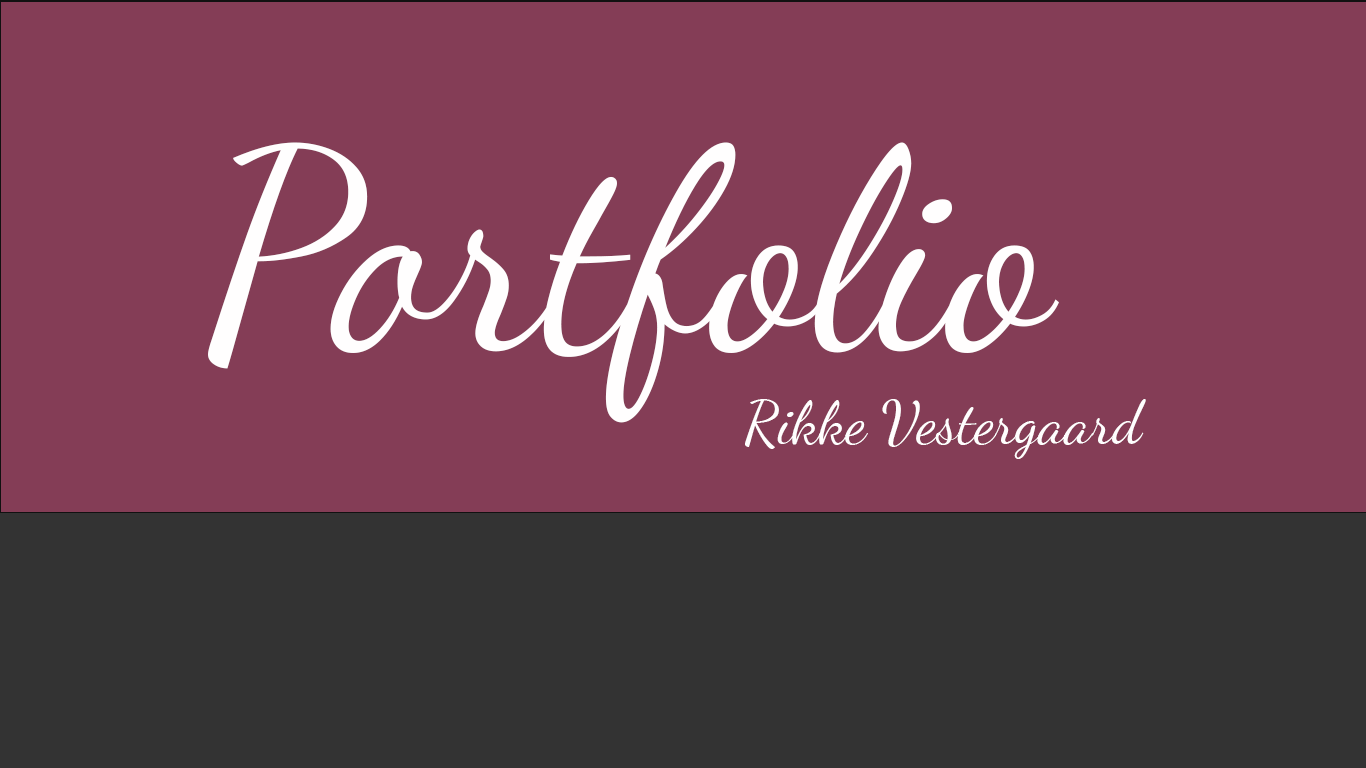
<style>
.page{position:relative;width:1366px;height:768px;background:#843d56}
.page>*{position:absolute;margin:0}
.t1{font:279.8px "DancingScript-Regular";color:#fffefe}
.t2{font:60px "DancingScript-Regular";color:#fffefe}
</style>
<div class="page">
<p class="t1" style="left:208px;top:142px;width:851px;height:281px">Portfolio</p>
<p class="t2" style="left:745px;top:399px;width:401px;height:60px">Rikke Vestergaard</p>
</div>
